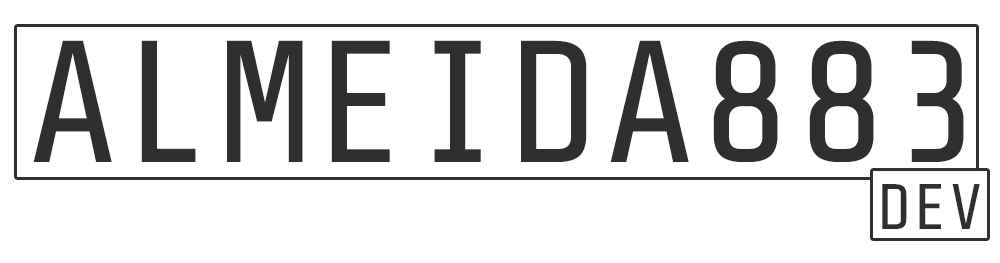
<style>
.page{position:relative;width:1000px;height:263px;background:#ffffff}
.page>*{position:absolute;margin:0}
.t1{font:172.9px "ShareTechMono-Regular";letter-spacing:0.02em;color:#2e2f31;text-transform:uppercase}
.t2{font:64.1px "ShareTechMono-Regular";letter-spacing:0.02em;color:#2e2f31;text-transform:uppercase}
</style>
<div class="page">
<p class="t1" style="left:33px;top:40px;width:931px;height:122px">ALMEIDA883</p>
<p class="t2" style="left:882px;top:184px;width:98px;height:45px">dev</p>
</div>
